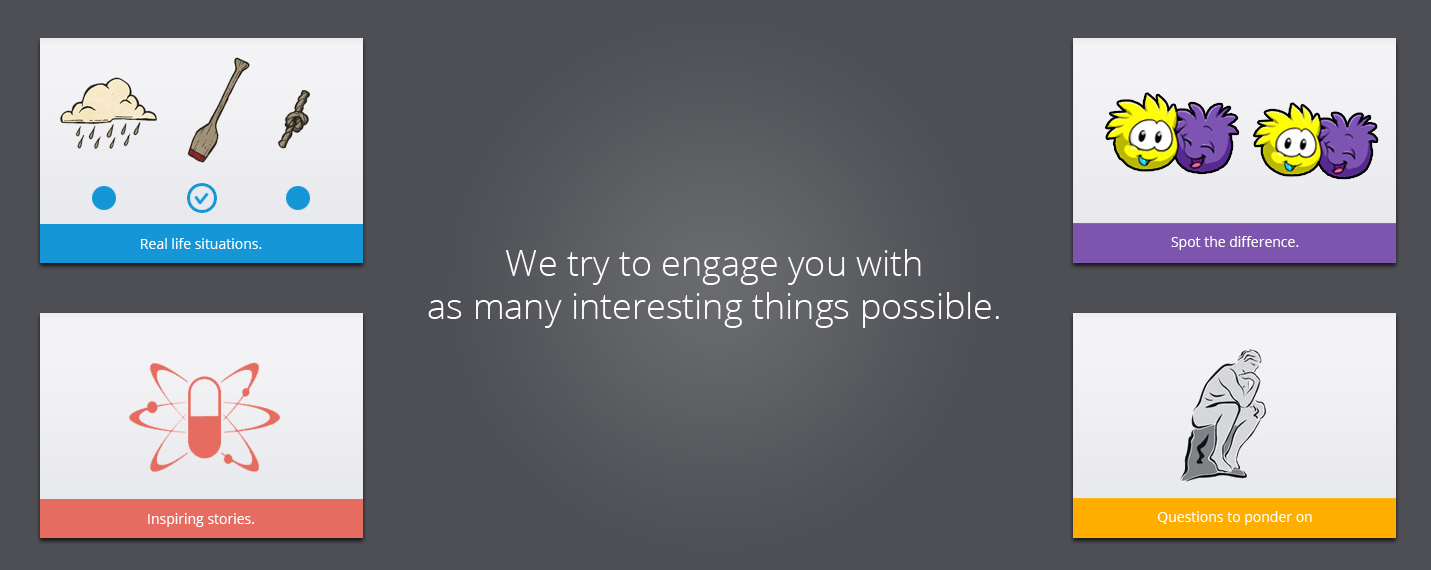
<style>
.page{position:relative;width:1431px;height:570px;background:#4e4f54}
.page>*{position:absolute;margin:0}
.t1{font:14px "OpenSans";color:#ffffff}
.t2{font:36px "OpenSans-Light";color:#ffffff}
</style>
<div class="page">
<p class="t1" style="left:141px;top:238px;width:121px;height:11px">Real life situations.</p>
<p class="t1" style="left:1171px;top:236px;width:128px;height:14px">Spot the difference.</p>
<p class="t2" style="left:428px;top:249px;width:571px;height:79px;text-align:center">We try to engage you with<br>as many interesting things possible.</p>
<p class="t1" style="left:148px;top:513px;width:106px;height:14px">Inspiring stories.</p>
<p class="t1" style="left:1158px;top:511px;width:154px;height:14px">Questions to ponder on</p>
</div>
